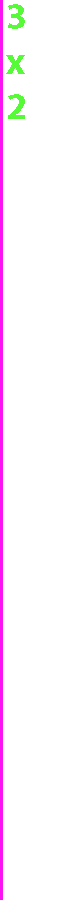
<style>
.page{position:relative;width:64px;height:900px;background:#ffffff}
.page>*{position:absolute;margin:0}
.t1{font:37.8px "MyriadPro-Bold";color:#57fa37}
</style>
<div class="page">
<p class="t1" style="left:6px;top:4px;width:19px;height:115px">3<br>х<br>2</p>
</div>
